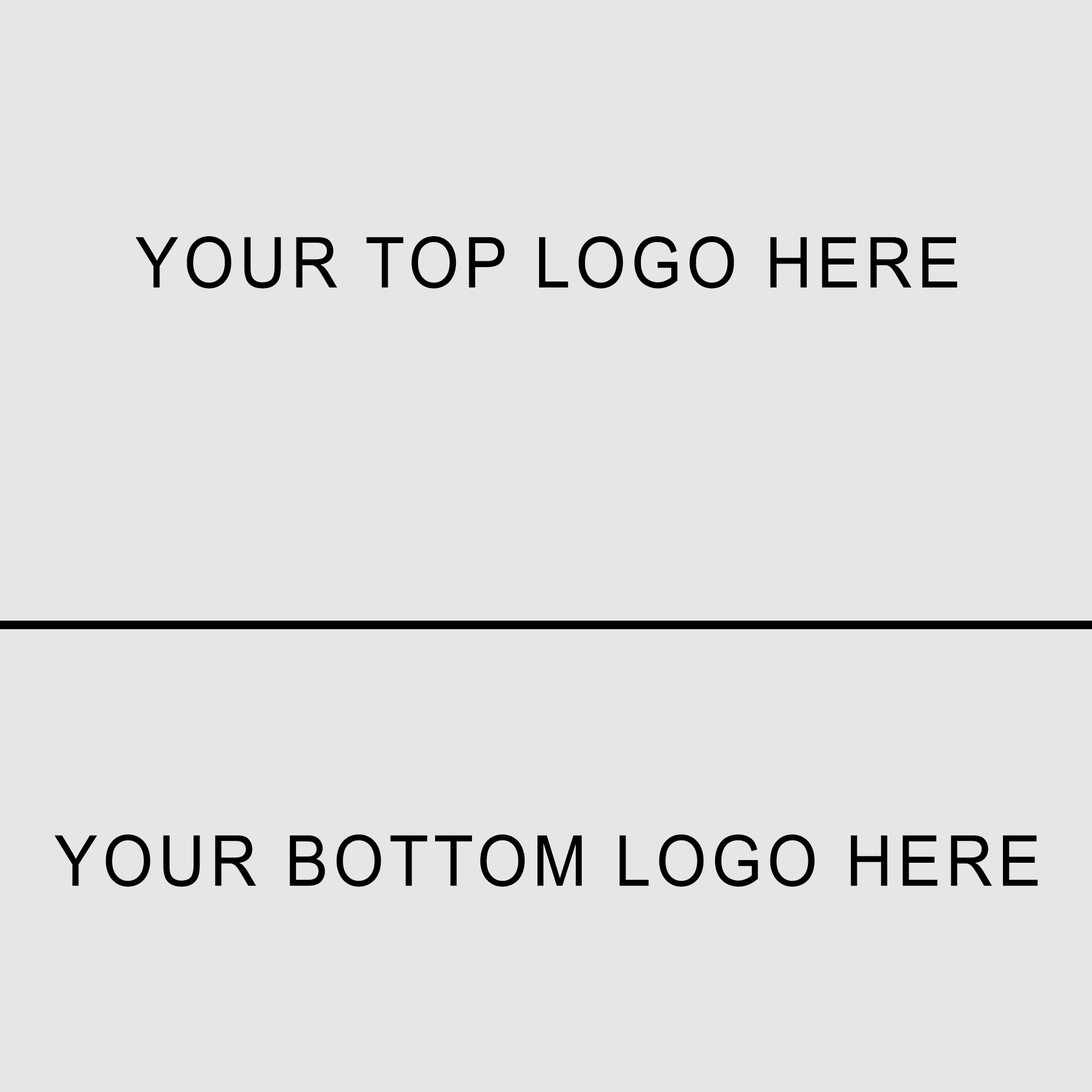
<style>
.page{position:relative;width:1092px;height:1092px;background:#e6e6e6}
.page>*{position:absolute;margin:0}
.t1{font:70.3px "ArialMT";letter-spacing:0.08em;color:#000000;scale:0.92 1}
</style>
<div class="page">
<p class="t1" style="left:135px;top:236px;width:822px;height:52px">YOUR TOP LOGO HERE</p>
<p class="t1" style="left:54px;top:834px;width:984px;height:53px">YOUR BOTTOM LOGO HERE</p>
</div>
